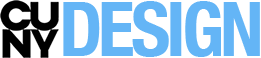
<style>
.page{position:relative;width:261px;height:58px;background:#64b5f6}
.page>*{position:absolute;margin:0}
.t1{font:75.8px "HelveticaNeue-CondensedBold";letter-spacing:-0.05em;color:#64b5f6}
</style>
<div class="page">
<p class="t1" style="left:63px;top:1px;width:197px;height:56px">DESIGN</p>
</div>
